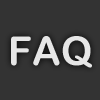
<style>
.page{position:relative;width:100px;height:100px;background:#333333}
.page>*{position:absolute;margin:0}
.t1{font:39.7px "ArialRoundedMTBold";color:#e6e6e6}
</style>
<div class="page">
<p class="t1" style="left:11px;top:36px;width:81px;height:32px">FAQ</p>
</div>
